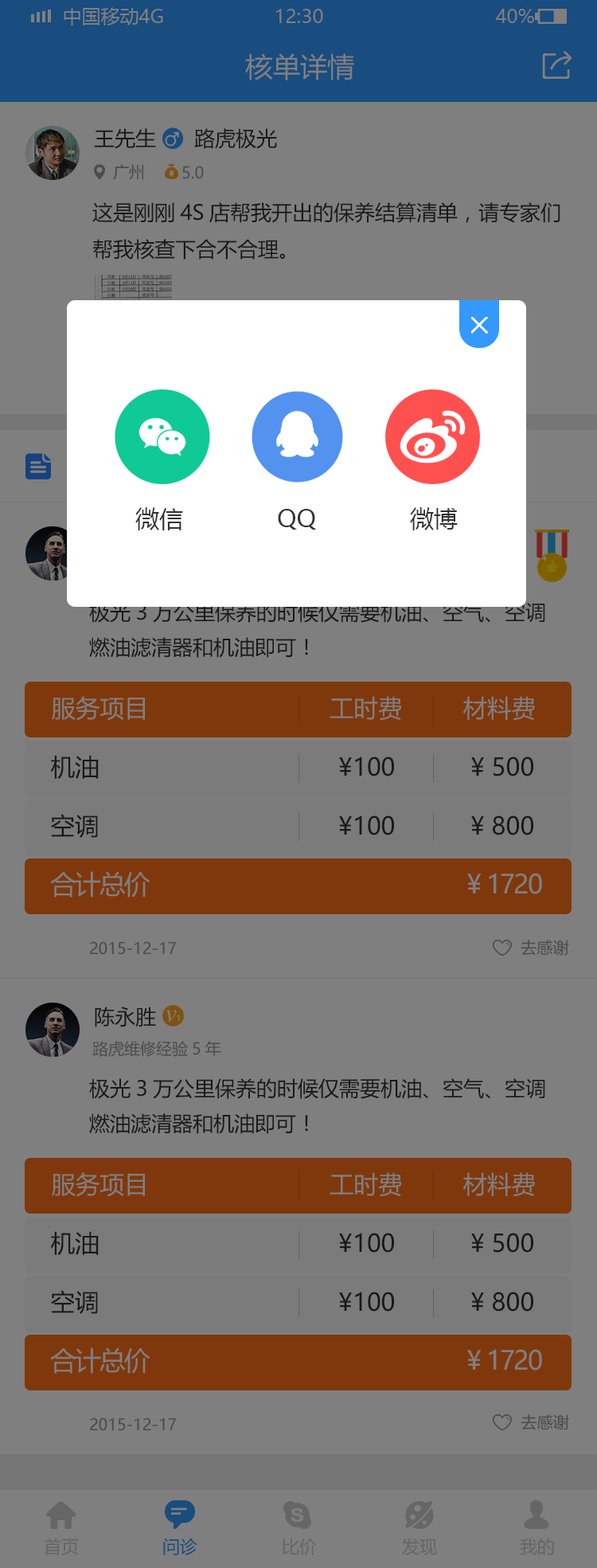
<style>
.page{position:relative;width:597px;height:1568px;background:#7f7f7f}
.page>*{position:absolute;margin:0}
.t1{font:27.1px "MicrosoftYaHei";color:#7f7f7f}
.t2{font:20.7px "MicrosoftYaHei";color:#191919}
.t3{font:15.9px "MicrosoftYaHei";color:#4c4c4c}
.t4{font:23.9px "MicrosoftYaHei";color:#333333}
.t5{font:20.7px/35px "MicrosoftYaHei";color:#191919}
.t6{font:24.3px "MicrosoftYaHei";color:#7f7f7f}
.t7{font:24.3px "MicrosoftYaHei";color:#191919}
.t8{font:26.1px "MicrosoftYaHei";letter-spacing:-0.06em;color:#7f7f7f}
.t9{font:17.5px "MicrosoftYaHei";color:#666666}
.t10{font:17.5px "MicrosoftYaHei";color:#194c7f}
</style>
<div class="page">
<p class="t1" style="left:245px;top:53px;width:109px;height:27px">核单详情</p>
<p class="t2" style="left:94px;top:128px;width:62px;height:21px">王先生</p>
<p class="t2" style="left:94px;top:128px;width:62px;height:21px">王先生</p>
<p class="t2" style="left:194px;top:128px;width:83px;height:21px">路虎极光</p>
<p class="t2" style="left:194px;top:128px;width:83px;height:21px">路虎极光</p>
<p class="t3" style="left:113px;top:164px;width:31px;height:16px">广州</p>
<p class="t3" style="left:113px;top:164px;width:31px;height:16px">广州</p>
<p class="t3" style="left:182px;top:166px;width:22px;height:13px">5.0</p>
<p class="t3" style="left:182px;top:166px;width:22px;height:13px">5.0</p>
<p class="t2" style="left:92px;top:202px;width:469px;height:58px">这是刚刚4S店帮我开出的保养结算清单，请专家们<br>帮我核查下合不合理。</p>
<p class="t4" style="left:135px;top:507px;width:48px;height:23px">微信</p>
<p class="t4" style="left:278px;top:509px;width:39px;height:21px">QQ</p>
<p class="t4" style="left:410px;top:507px;width:48px;height:23px">微博</p>
<p class="t5" style="left:89px;top:602px;width:456px;height:56px">极光3万公里保养的时候仅需要机油、空气、空调<br>燃油滤清器和机油即可！</p>
<p class="t6" style="left:52px;top:696px;width:93px;height:25px">服务项目</p>
<p class="t6" style="left:330px;top:696px;width:71px;height:25px">工时费</p>
<p class="t6" style="left:463px;top:696px;width:72px;height:25px">材料费</p>
<p class="t7" style="left:51px;top:755px;width:48px;height:24px">机油</p>
<p class="t7" style="left:339px;top:757px;width:55px;height:19px">¥100</p>
<p class="t7" style="left:471px;top:757px;width:63px;height:19px">¥ 500</p>
<p class="t7" style="left:51px;top:814px;width:47px;height:24px">空调</p>
<p class="t7" style="left:339px;top:815px;width:55px;height:20px">¥100</p>
<p class="t7" style="left:471px;top:815px;width:63px;height:20px">¥ 800</p>
<p class="t7" style="left:471px;top:815px;width:63px;height:20px">¥ 800</p>
<p class="t8" style="left:50px;top:871px;width:101px;height:26px">合计总价</p>
<p class="t8" style="left:467px;top:873px;width:75px;height:21px">¥ 1720</p>
<p class="t3" style="left:90px;top:941px;width:87px;height:14px">2015-12-17</p>
<p class="t3" style="left:521px;top:940px;width:48px;height:16px">去感谢</p>
<p class="t2" style="left:95px;top:1007px;width:61px;height:20px">陈永胜</p>
<p class="t3" style="left:92px;top:1041px;width:129px;height:16px">路虎维修经验5年</p>
<p class="t5" style="left:89px;top:1078px;width:456px;height:56px">极光3万公里保养的时候仅需要机油、空气、空调<br>燃油滤清器和机油即可！</p>
<p class="t6" style="left:52px;top:1172px;width:93px;height:25px">服务项目</p>
<p class="t6" style="left:330px;top:1172px;width:71px;height:25px">工时费</p>
<p class="t6" style="left:463px;top:1172px;width:72px;height:25px">材料费</p>
<p class="t7" style="left:51px;top:1231px;width:48px;height:24px">机油</p>
<p class="t7" style="left:339px;top:1233px;width:55px;height:20px">¥100</p>
<p class="t7" style="left:471px;top:1233px;width:63px;height:20px">¥ 500</p>
<p class="t7" style="left:51px;top:1290px;width:47px;height:24px">空调</p>
<p class="t7" style="left:339px;top:1292px;width:55px;height:20px">¥100</p>
<p class="t7" style="left:471px;top:1292px;width:63px;height:20px">¥ 800</p>
<p class="t7" style="left:471px;top:1292px;width:63px;height:20px">¥ 800</p>
<p class="t8" style="left:50px;top:1347px;width:101px;height:27px">合计总价</p>
<p class="t8" style="left:467px;top:1349px;width:75px;height:22px">¥ 1720</p>
<p class="t3" style="left:90px;top:1417px;width:87px;height:14px">2015-12-17</p>
<p class="t3" style="left:521px;top:1414px;width:48px;height:16px">去感谢</p>
<p class="t9" style="left:44px;top:1538px;width:35px;height:17px">首页</p>
<p class="t10" style="left:163px;top:1538px;width:34px;height:17px">问诊</p>
<p class="t9" style="left:283px;top:1538px;width:34px;height:17px">比价</p>
<p class="t9" style="left:402px;top:1538px;width:35px;height:17px">发现</p>
<p class="t9" style="left:520px;top:1538px;width:34px;height:17px">我的</p>
</div>
